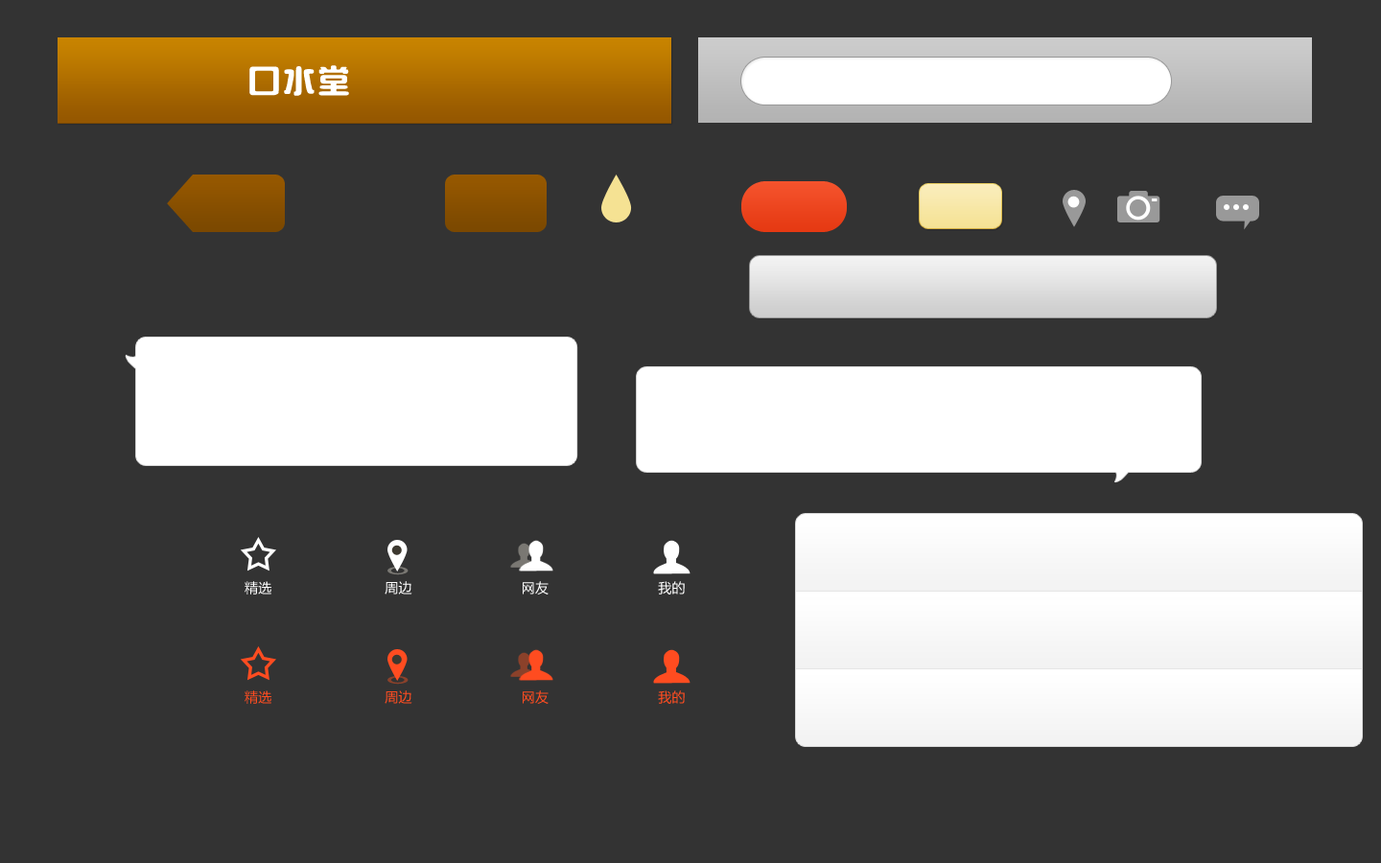
<style>
.page{position:relative;width:1381px;height:863px;background:#333333}
.page>*{position:absolute;margin:0}
.t1{font:34.5px "¾­µä·±Ô²ÒÕ Regular";letter-spacing:0.01em;color:#ffffff}
.t2{font:13.4px "MicrosoftYaHei";letter-spacing:0.01em;color:#ffffff}
.t3{font:13.4px "MicrosoftYaHei";letter-spacing:0.01em;color:#ff4c20}
</style>
<div class="page">
<p class="t1" style="left:249px;top:65px;width:100px;height:31px">口水堂</p>
<p class="t2" style="left:245px;top:581px;width:26px;height:14px">精选</p>
<p class="t2" style="left:385px;top:581px;width:27px;height:14px">周边</p>
<p class="t2" style="left:523px;top:581px;width:26px;height:14px">网友</p>
<p class="t2" style="left:658px;top:581px;width:27px;height:14px">我的</p>
<p class="t3" style="left:245px;top:691px;width:26px;height:13px">精选</p>
<p class="t3" style="left:385px;top:691px;width:27px;height:13px">周边</p>
<p class="t3" style="left:523px;top:691px;width:26px;height:13px">网友</p>
<p class="t3" style="left:658px;top:691px;width:27px;height:13px">我的</p>
</div>
